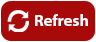
<style>
.page{position:relative;width:96px;height:42px;background:#a80a09}
.page>*{position:absolute;margin:0}
.t1{font:16.2px "MyriadPro-Bold";color:#ffffff}
</style>
<div class="page">
<p class="t1" style="left:35px;top:14px;width:53px;height:12px">Refresh</p>
</div>
